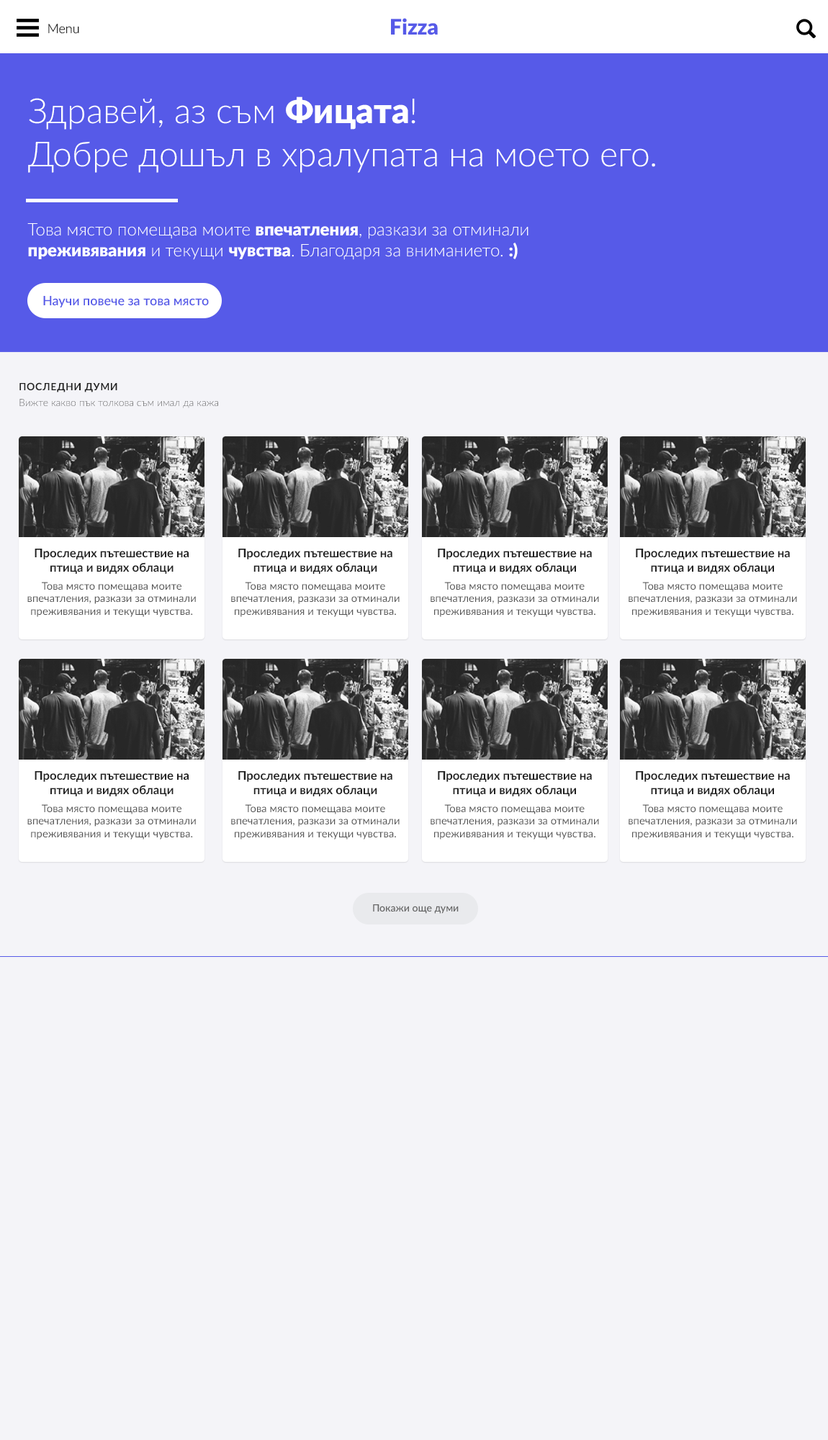
<style>
.page{position:relative;width:828px;height:1440px;background:#f4f4f8}
.page>*{position:absolute;margin:0}
.t1{font:13px "Lato-Light"}
.t2{font:21.6px "Lato-Black";color:#565ae8}
.t3{font:34.6px/43.2px "Lato-Light";color:#ffffff}
.t4{font:34.6px/43.2px "Lato-Black";color:#ffffff}
.t5{font:17.3px "Lato-Light";color:#ffffff}
.t6{font:17.3px "Lato-Black";color:#ffffff}
.t7{font:13px "Lato-Semibold";color:#565ae8}
.t8{font:10.1px "Lato-Bold";letter-spacing:0.05em;color:#222222}
.t9{font:10.1px "Lato-Light"}
.t10{font:12px "Lato-Bold";color:#222222}
.t11{font:10.7px "Lato-Regular";color:#555555}
.t12{font:10.1px "Lato-Semibold";color:#666666}
</style>
<div class="page">
<p class="t1" style="left:48px;top:24px;width:31px;height:10px">Menu</p>
<p class="t2" style="left:391px;top:18px;width:47px;height:17px">Fizza</p>
<p class="t3" style="left:28px;top:96px;width:627px;height:77px">Здравей, аз съм <span class="t4">Фицата</span>!<br>Добре дошъл в хралупата на моето его.</p>
<p class="t5" style="left:27px;top:223px;width:502px;height:37px">Това място помещава моите <span class="t6">впечатления</span>, разкази за отминали <span class="t6">преживявания</span> и текущи <span class="t6">чувства</span>. Благодаря за вниманието. <span class="t6">:)</span></p>
<p class="t7" style="left:43px;top:296px;width:166px;height:11px">Научи повече за това място</p>
<p class="t8" style="left:19px;top:382px;width:98px;height:10px">ПОСЛЕДНИ ДУМИ</p>
<p class="t9" style="left:19px;top:399px;width:199px;height:9px">Вижте какво пък толкова съм имал да кажа</p>
<p class="t10" style="left:35px;top:549px;width:154px;height:25px;text-align:center">Проследих пътешествие на птица и видях облаци</p>
<p class="t10" style="left:238px;top:549px;width:154px;height:25px;text-align:center">Проследих пътешествие на птица и видях облаци</p>
<p class="t10" style="left:438px;top:549px;width:154px;height:25px;text-align:center">Проследих пътешествие на птица и видях облаци</p>
<p class="t10" style="left:636px;top:549px;width:154px;height:25px;text-align:center">Проследих пътешествие на птица и видях облаци</p>
<p class="t11" style="left:27px;top:582px;width:169px;height:35px;text-align:center">Това място помещава моите впечатления, разкази за отминали преживявания и текущи чувства.</p>
<p class="t11" style="left:231px;top:582px;width:169px;height:35px;text-align:center">Това място помещава моите впечатления, разкази за отминали преживявания и текущи чувства.</p>
<p class="t11" style="left:431px;top:582px;width:168px;height:35px;text-align:center">Това място помещава моите впечатления, разкази за отминали преживявания и текущи чувства.</p>
<p class="t11" style="left:629px;top:582px;width:168px;height:35px;text-align:center">Това място помещава моите впечатления, разкази за отминали преживявания и текущи чувства.</p>
<p class="t10" style="left:35px;top:771px;width:154px;height:25px;text-align:center">Проследих пътешествие на птица и видях облаци</p>
<p class="t10" style="left:238px;top:771px;width:154px;height:25px;text-align:center">Проследих пътешествие на птица и видях облаци</p>
<p class="t10" style="left:438px;top:771px;width:154px;height:25px;text-align:center">Проследих пътешествие на птица и видях облаци</p>
<p class="t10" style="left:636px;top:771px;width:154px;height:25px;text-align:center">Проследих пътешествие на птица и видях облаци</p>
<p class="t11" style="left:27px;top:804px;width:169px;height:36px;text-align:center">Това място помещава моите впечатления, разкази за отминали преживявания и текущи чувства.</p>
<p class="t11" style="left:231px;top:804px;width:169px;height:36px;text-align:center">Това място помещава моите впечатления, разкази за отминали преживявания и текущи чувства.</p>
<p class="t11" style="left:431px;top:804px;width:168px;height:36px;text-align:center">Това място помещава моите впечатления, разкази за отминали преживявания и текущи чувства.</p>
<p class="t11" style="left:629px;top:804px;width:168px;height:36px;text-align:center">Това място помещава моите впечатления, разкази за отминали преживявания и текущи чувства.</p>
<p class="t12" style="left:373px;top:904px;width:86px;height:10px">Покажи още думи</p>
</div>
